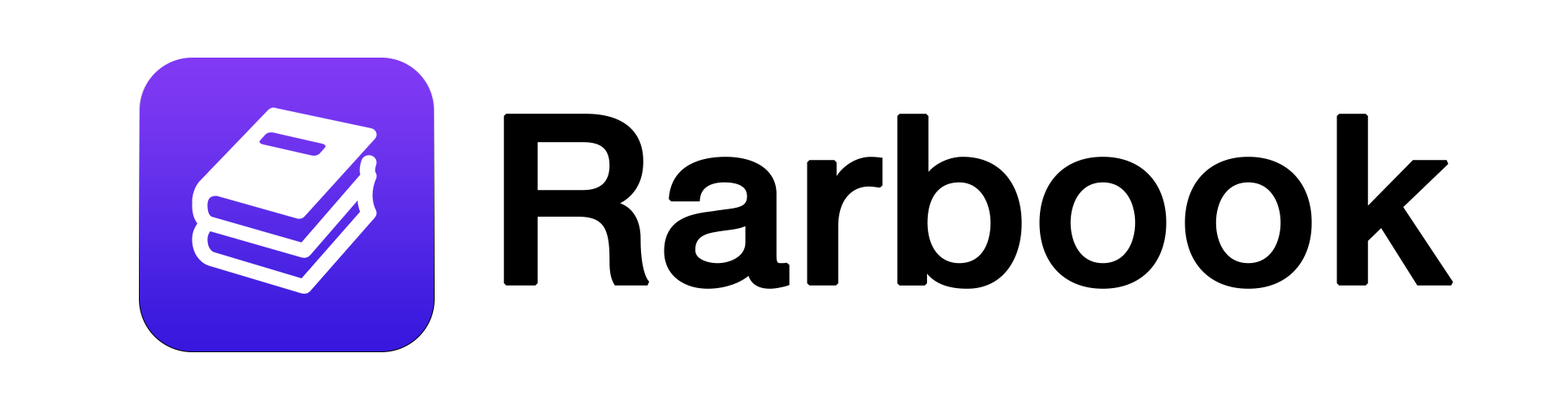
<style>
.page{position:relative;width:1568px;height:409px;background:#ffffff}
.page>*{position:absolute;margin:0}
.t1{font:234.1px "HelveticaNeue-Medium";color:#000000;font-weight:bold}
</style>
<div class="page">
<p class="t1" style="left:504px;top:114px;width:949px;height:175px">Rarbook</p>
</div>
